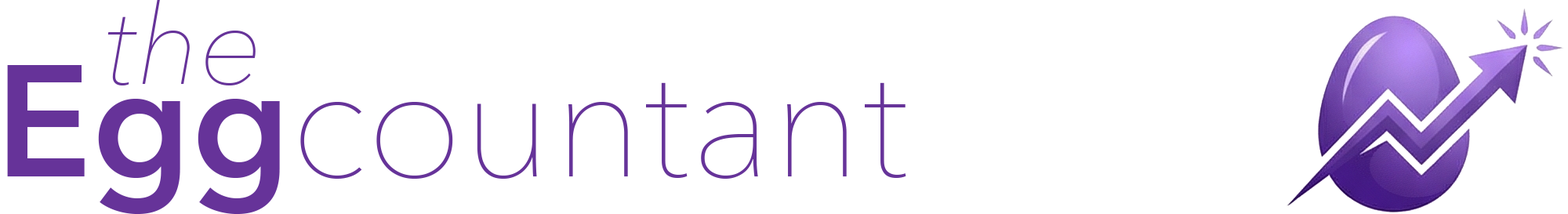
<style>
.page{position:relative;width:1568px;height:214px;background:#ffffff}
.page>*{position:absolute;margin:0}
.t1{font:111.9px "AvenirNext-UltraLightItalic";color:#663399}
.t2{font:157.7px "AvenirNext-UltraLight";color:#663399}
.t3{font:157.7px "AvenirNext-DemiBold";color:#663399}
</style>
<div class="page">
<p class="t1" style="left:107px;top:0px;width:149px;height:85px">the</p>
<p class="t2" style="left:7px;top:65px;width:899px;height:149px"><span class="t3">Egg</span>countant</p>
</div>
